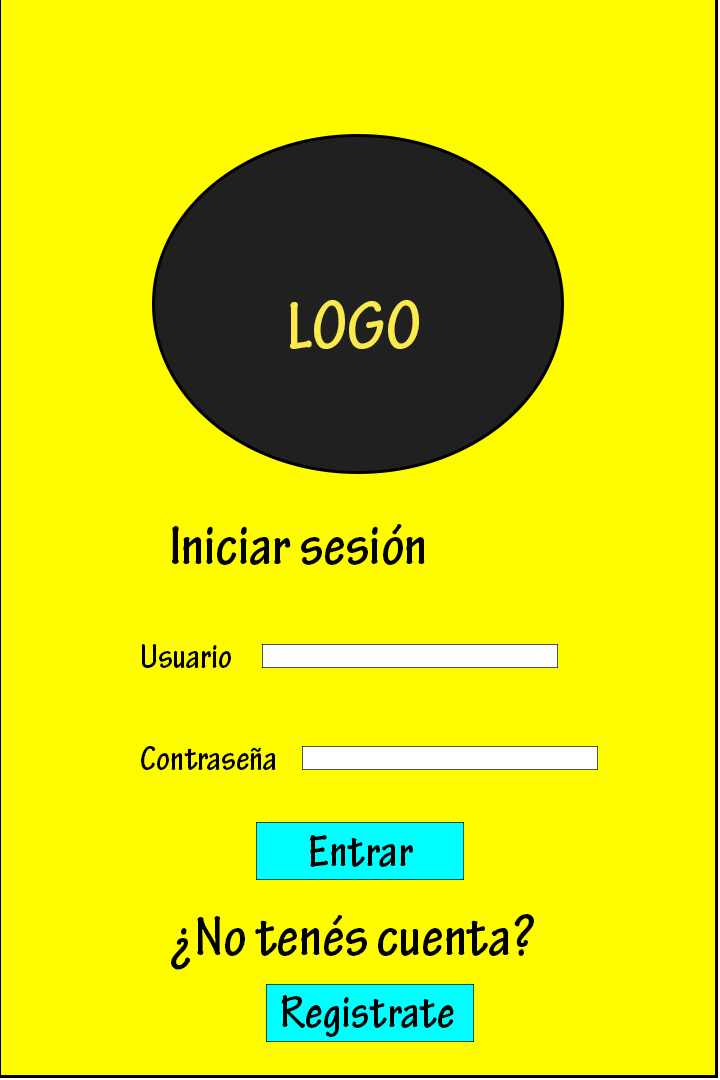
<style>
.page{position:relative;width:720px;height:1080px;background:#fffc00}
.page>*{position:absolute;margin:0}
.t1{font:72px "TektonPro-BoldCond";color:#fbea4c}
.t2{font:60px "TektonPro-BoldCond";color:#010101}
.t3{font:36px "TektonPro-BoldCond";color:#000000}
.t4{font:48px "TektonPro-BoldCond";color:#000000}
.t5{font:60px "TektonPro-BoldCond";color:#000000}
</style>
<div class="page">
<p class="t1" style="left:290px;top:300px;width:129px;height:49px">LOGO</p>
<p class="t2" style="left:172px;top:524px;width:253px;height:41px">Iniciar sesión</p>
<p class="t3" style="left:141px;top:644px;width:90px;height:24px">Usuario</p>
<p class="t3" style="left:141px;top:746px;width:135px;height:24px">Contraseña</p>
<p class="t4" style="left:310px;top:835px;width:103px;height:32px">Entrar</p>
<p class="t5" style="left:171px;top:914px;width:363px;height:56px">¿No tenés cuenta?</p>
<p class="t4" style="left:281px;top:995px;width:173px;height:42px">Registrate</p>
</div>
